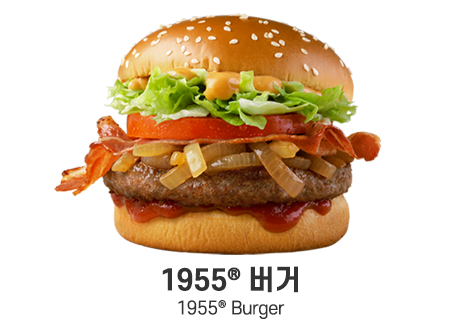
<style>
.page{position:relative;width:460px;height:330px;background:#ffffff}
.page>*{position:absolute;margin:0}
.t1{font:17.5px/24px "S-CoreDream-4Regular";letter-spacing:-0.02em;color:#333333}
.t2{font:28px/24px "S-CoreDream-6Bold";letter-spacing:-0.02em;color:#333333}
</style>
<div class="page">
<p class="t1" style="left:162px;top:266px;width:136px;height:53px;text-align:center"><span class="t2">1955® 버거<br></span>1955® Burger</p>
</div>
